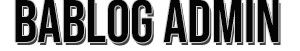
<style>
.page{position:relative;width:300px;height:51px;background:#ffffff}
.page>*{position:absolute;margin:0}
.t1{font:60px "BebasNeue-Regular";color:#040404}
</style>
<div class="page">
<p class="t1" style="left:15px;top:0px;width:264px;height:43px">BaBlog adMIN</p>
</div>
